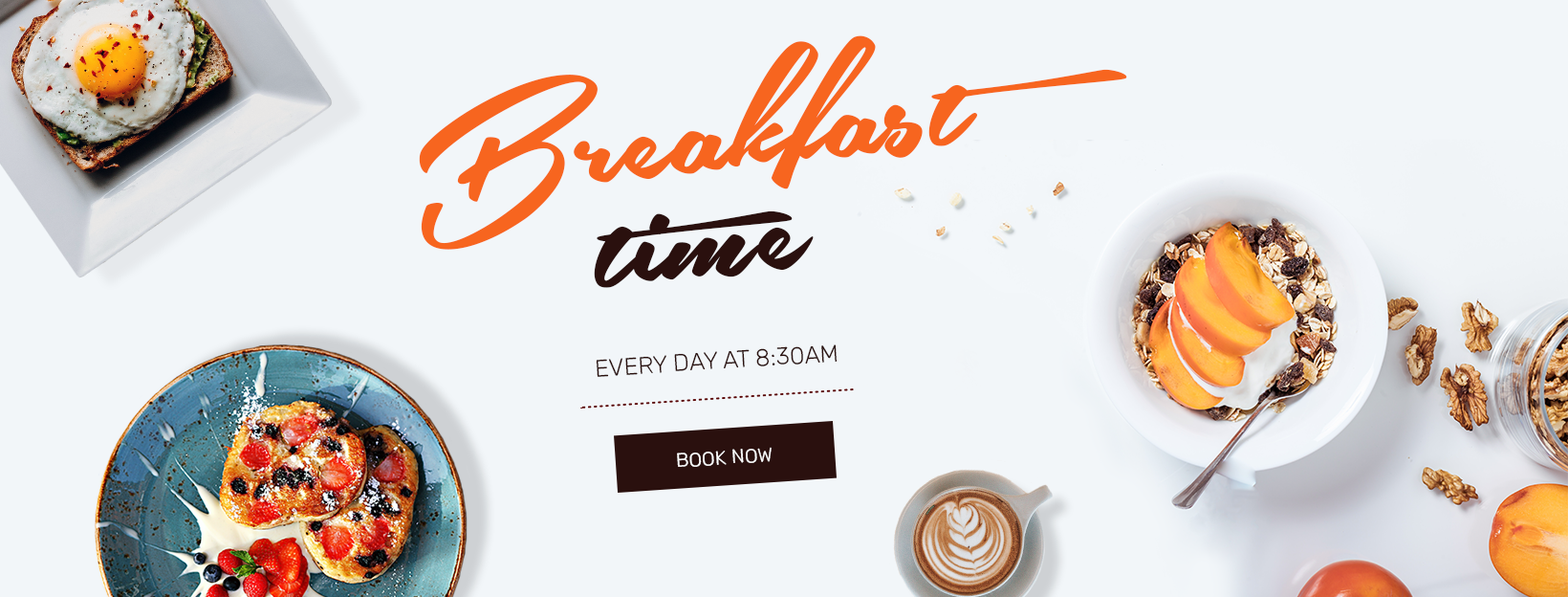
<style>
.page{position:relative;width:1568px;height:597px;background:#f2f6f9}
.page>*{position:absolute;margin:0}
.t1{font:210.3px/105.2px "SouthernAirePersonalUseOnly";color:#f7651f}
.t2{font:210.3px/105.2px "SouthernAirePersonalUseOnly";color:#2a100e}
.t3{font:23.9px "Rubik-Light";color:#2a100e;text-transform:uppercase}
.t4{font:19.1px "Rubik-Light";letter-spacing:0.02em;color:#ffffff}
</style>
<div class="page">
<p class="t1" style="left:419px;top:35px;width:708px;height:253px;text-align:center;rotate:-6deg">Breakfast<br><span class="t2">time</span></p>
<p class="t3" style="left:596px;top:344px;width:242px;height:33px;rotate:-4deg">Every day at 8:30am</p>
<p class="t4" style="left:677px;top:446px;width:95px;height:21px;rotate:-4deg">BOOK NOW</p>
</div>
